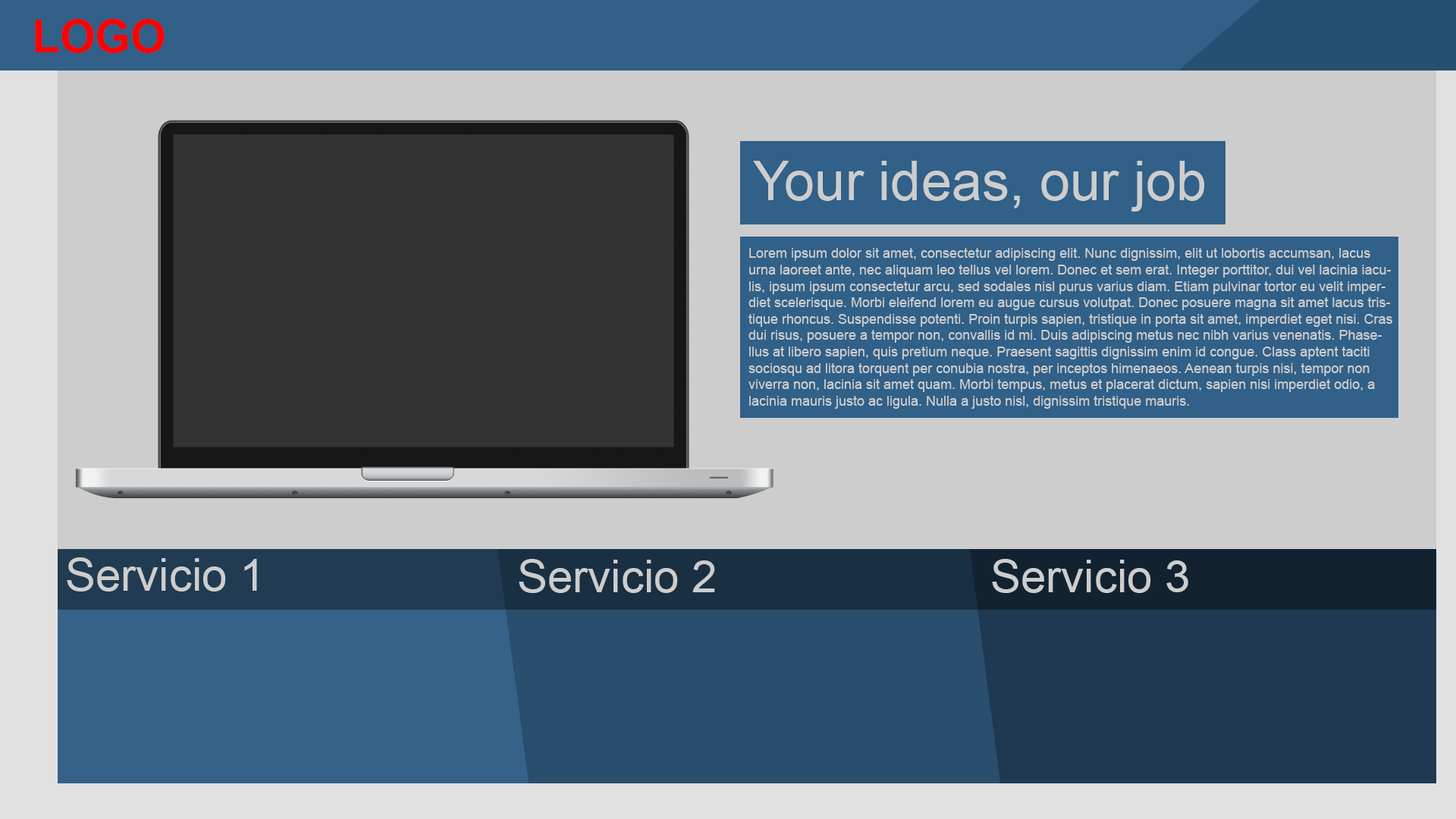
<style>
.page{position:relative;width:1456px;height:819px;background:#cdcdcd}
.page>*{position:absolute;margin:0}
.t1{font:45.5px "Arial-BoldMT";color:#ff0000}
.t2{font:54.6px "ArialMT";color:#cdcdcd}
.t3{font:13.6px "ArialMT";color:#cdcdcd}
.t4{font:45.5px "ArialMT";color:#cdcdcd}
</style>
<div class="page">
<p class="t1" style="left:35px;top:19px;width:130px;height:34px">LOGO</p>
<p class="t2" style="left:753px;top:161px;width:451px;height:51px">Your ideas, our job</p>
<p class="t3" style="left:748px;top:248px;width:644px;height:161px">Lorem ipsum dolor sit amet, consectetur adipiscing elit. Nunc dignissim, elit ut lobortis accumsan, lacus urna laoreet ante, nec aliquam leo tellus vel lorem. Donec et sem erat. Integer porttitor, dui vel lacinia iaculis, ipsum ipsum consectetur arcu, sed sodales nisl purus varius diam. Etiam pulvinar tortor eu velit imperdiet scelerisque. Morbi eleifend lorem eu augue cursus volutpat. Donec posuere magna sit amet lacus tristique rhoncus. Suspendisse potenti. Proin turpis sapien, tristique in porta sit amet, imperdiet eget nisi. Cras dui risus, posuere a tempor non, convallis id mi. Duis adipiscing metus nec nibh varius venenatis. Phasellus at libero sapien, quis pretium neque. Praesent sagittis dignissim enim id congue. Class aptent taciti sociosqu ad litora torquent per conubia nostra, per inceptos himenaeos. Aenean turpis nisi, tempor non viverra non, lacinia sit amet quam. Morbi tempus, metus et placerat dictum, sapien nisi imperdiet odio, a lacinia mauris justo ac ligula. Nulla a justo nisl, dignissim tristique mauris.</p>
<p class="t4" style="left:67px;top:557px;width:190px;height:34px">Servicio 1</p>
<p class="t4" style="left:519px;top:559px;width:196px;height:34px">Servicio 2</p>
<p class="t4" style="left:992px;top:559px;width:196px;height:34px">Servicio 3</p>
</div>
